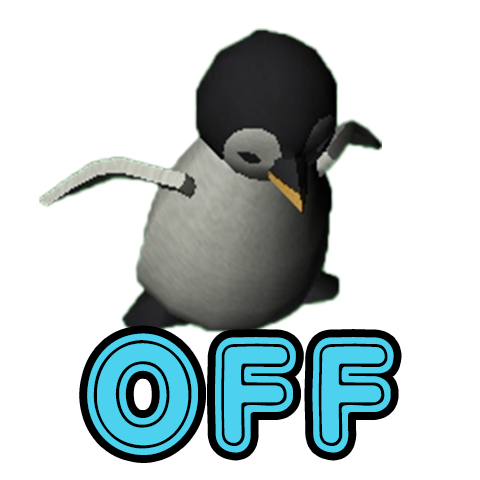
<style>
.page{position:relative;width:480px;height:480px;background:#ffffff}
.page>*{position:absolute;margin:0}
.t1{font:160px "DokiDokiFantasia";letter-spacing:0.06em;color:#4cd2ef}
</style>
<div class="page">
<p class="t1" style="left:87px;top:333px;width:307px;height:122px">OFF</p>
</div>
